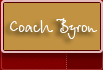
<style>
.page{position:relative;width:103px;height:70px;background:#c19242}
.page>*{position:absolute;margin:0}
.t1{font:18px "BetinaScript";color:#fefefe}
</style>
<div class="page">
<p class="t1" style="left:10px;top:18px;width:87px;height:21px">Coach Byron</p>
</div>
